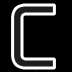
<style>
.page{position:relative;width:72px;height:72px;background:#000000}
.page>*{position:absolute;margin:0}
.t1{font:72px "Zekton-Bold"}
</style>
<div class="page">
<p class="t1" style="left:12px;top:5px;width:43px;height:63px">C</p>
</div>
